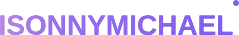
<style>
.page{position:relative;width:239px;height:35px;background:#ffffff}
.page>*{position:absolute;margin:0}
.t1{font:28px "Arial-BoldMT";color:#9069ec}
</style>
<div class="page">
<p class="t1" style="left:0px;top:15px;width:233px;height:21px">ISONNYMICHAEL</p>
</div>
